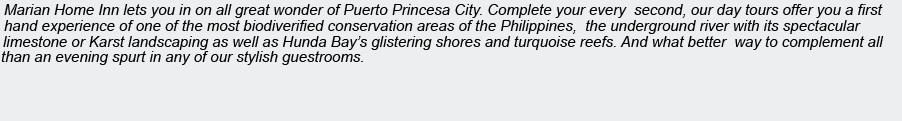
<style>
.page{position:relative;width:902px;height:121px;background:#edeef0}
.page>*{position:absolute;margin:0}
.t1{font:15px "Arial-ItalicMT";color:#000000}
</style>
<div class="page">
<p class="t1" style="left:4px;top:4px;width:879px;height:14px">Marian Home Inn lets you in on all great wonder of Puerto Princesa City. Complete your every  second, our day tours offer you a first</p>
<p class="t1" style="left:4px;top:20px;width:857px;height:14px">hand experience of one of the most biodiverified conservation areas of the Philippines,  the underground river with its spectacular</p>
<p class="t1" style="left:3px;top:36px;width:881px;height:14px">limestone or Karst landscaping as well as Hunda Bay’s glistering shores and turquoise reefs. And what better  way to complement all</p>
<p class="t1" style="left:1px;top:51px;width:362px;height:14px">than an evening spurt in any of our stylish guestrooms.</p>
</div>
